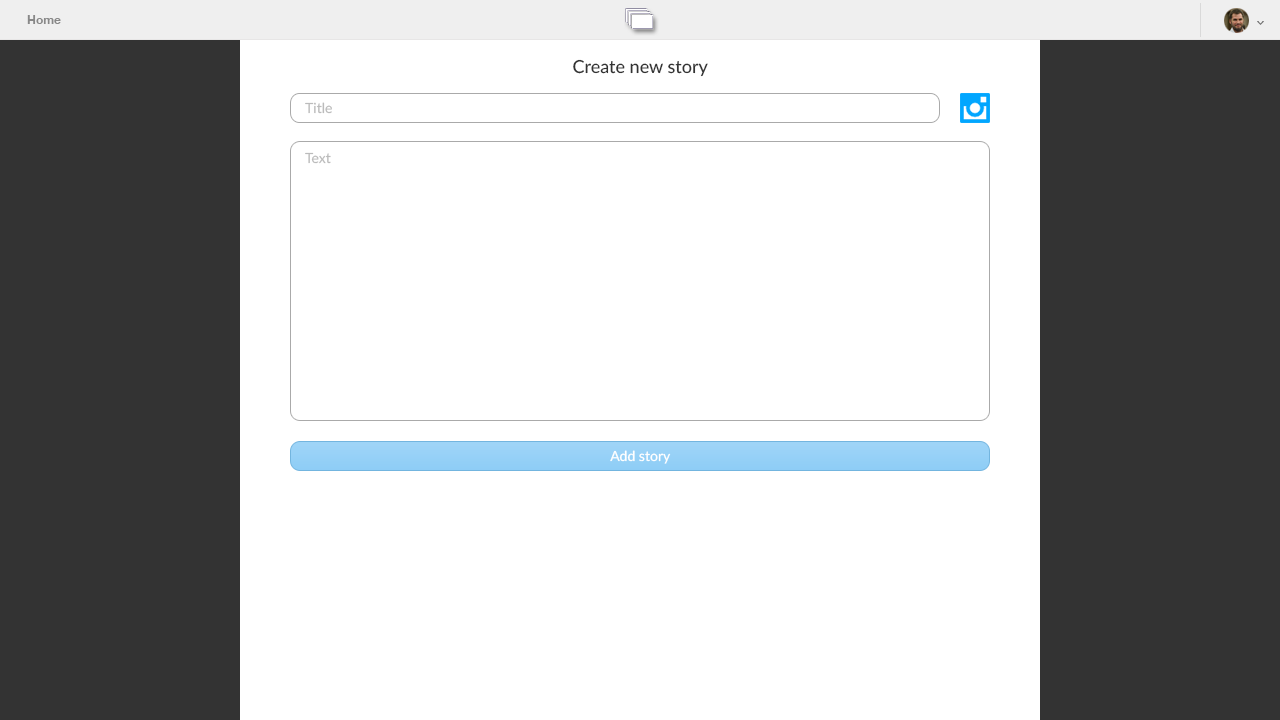
<style>
.page{position:relative;width:1280px;height:720px;background:#ffffff}
.page>*{position:absolute;margin:0}
.t1{font:12px "HelveticaNeue-Bold";color:#888888}
.t2{font:18px "Lato-Medium";color:#333333}
.t3{font:14px "Lato-Regular";color:#bbbbbb}
.t4{font:14px "Lato-Medium";color:#ffffff}
</style>
<div class="page">
<p class="t1" style="left:27px;top:15px;width:34px;height:9px">Home</p>
<p class="t2" style="left:573px;top:59px;width:135px;height:18px">Create new story</p>
<p class="t3" style="left:305px;top:102px;width:27px;height:12px">Title</p>
<p class="t3" style="left:305px;top:152px;width:26px;height:12px">Text</p>
<p class="t4" style="left:610px;top:450px;width:61px;height:14px">Add story</p>
</div>
